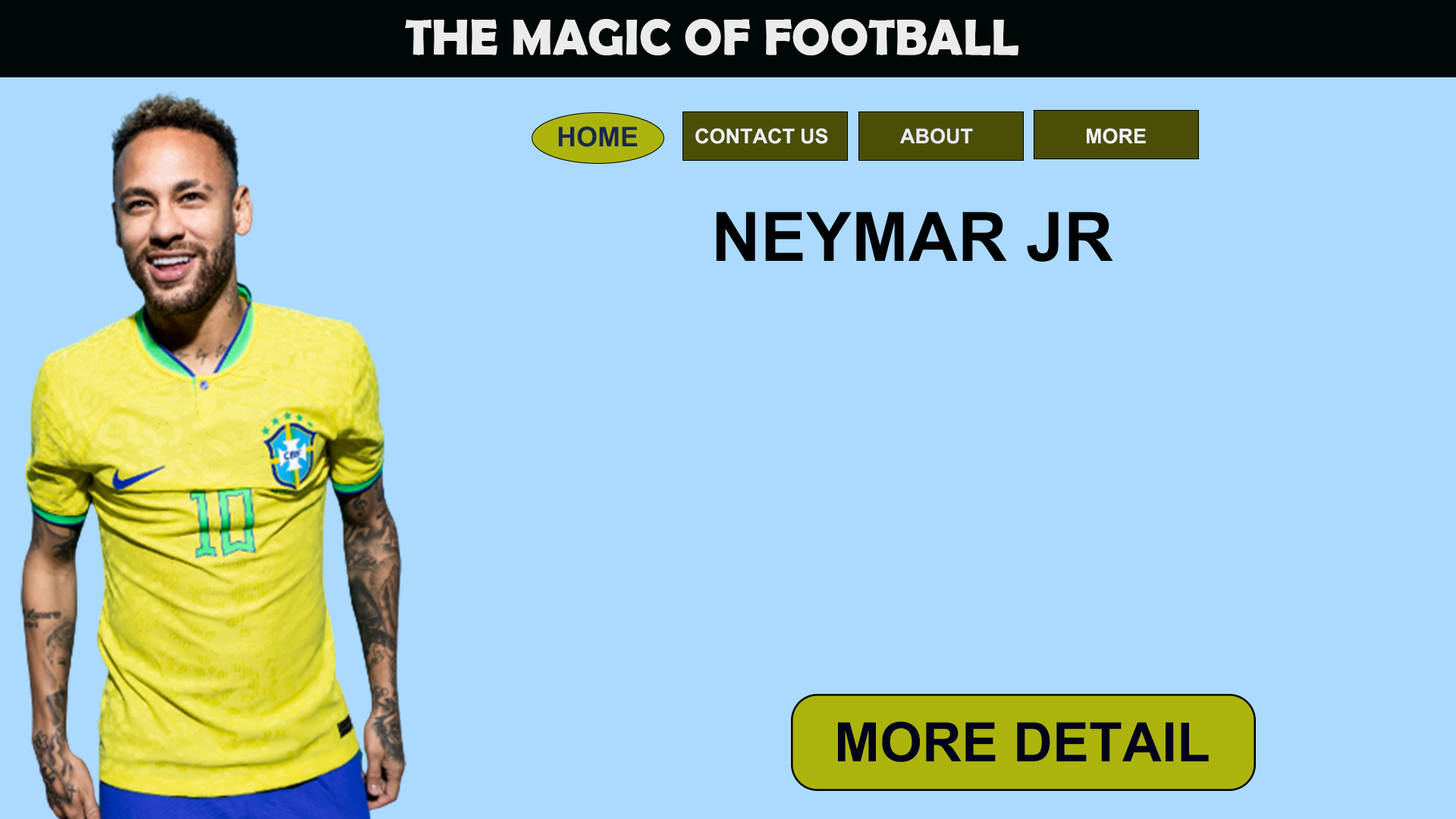
<style>
.page{position:relative;width:1456px;height:819px;background:#acdaff}
.page>*{position:absolute;margin:0}
.t1{font:50.9px "BerlinSansFBDemi-Bold";color:#ebebec}
.t2{font:27.3px "AKbalthomSeoul";color:#1a284d}
.t3{font:20.5px "AKbalthomSeoul";color:#f1f1f1}
.t4{font:20.5px "AKbalthomSeoul";color:#eaebf6}
.t5{font:20.5px "AKbalthomSeoul";color:#f4f4f7}
.t6{font:68.2px "AKbalthomSeoul";color:#000203}
.t7{font:54.6px "AKbalthomSeoul";color:#02031b}
</style>
<div class="page">
<p class="t1" style="left:405px;top:19px;width:613px;height:36px">THE MAGIC OF FOOTBALL</p>
<p class="t2" style="left:558px;top:126px;width:80px;height:21px">HOME</p>
<p class="t3" style="left:695px;top:128px;width:133px;height:16px">CONTACT US</p>
<p class="t4" style="left:900px;top:128px;width:73px;height:16px">ABOUT</p>
<p class="t5" style="left:1087px;top:128px;width:59px;height:16px">MORE</p>
<p class="t6" style="left:716px;top:212px;width:397px;height:50px">NEYMAR JR</p>
<p class="t7" style="left:838px;top:721px;width:371px;height:41px">MORE DETAIL</p>
</div>
